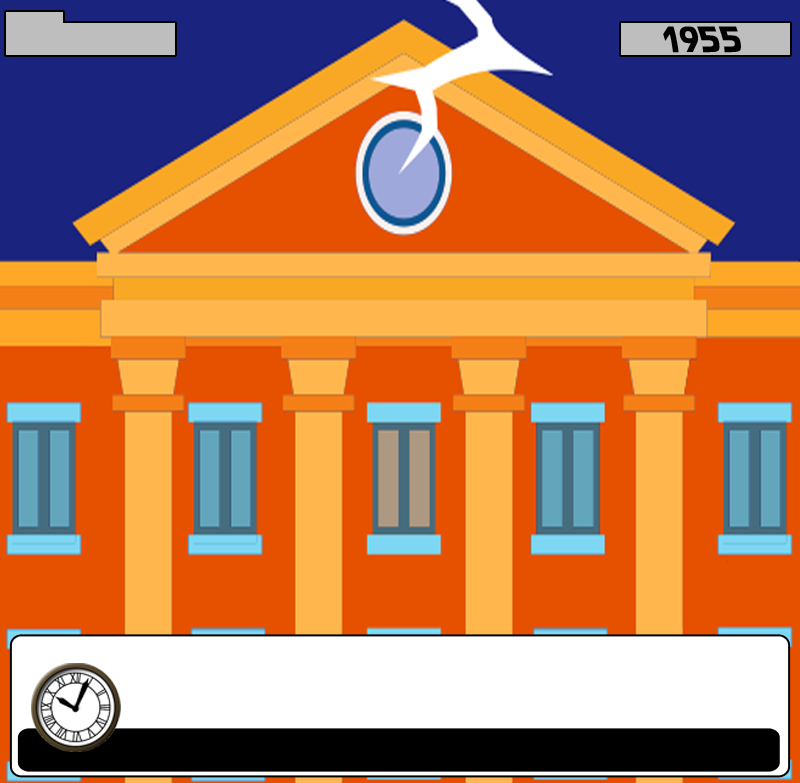
<style>
.page{position:relative;width:800px;height:783px;background:#e65100}
.page>*{position:absolute;margin:0}
.t1{font:28.9px "Backtothefuture2002-Regular";color:#000000;scale:0.88 1}
</style>
<div class="page">
<p class="t1" style="left:663px;top:26px;width:78px;height:27px">1955</p>
</div>
